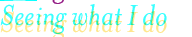
<style>
.page{position:relative;width:192px;height:37px;background:#ffffff}
.page>*{position:absolute;margin:0}
.t1{font:33.3px "MrsEavesItalic"}
</style>
<div class="page">
<p class="t1" style="left:0px;top:4px;width:167px;height:30px">Seeing what I do</p>
</div>
